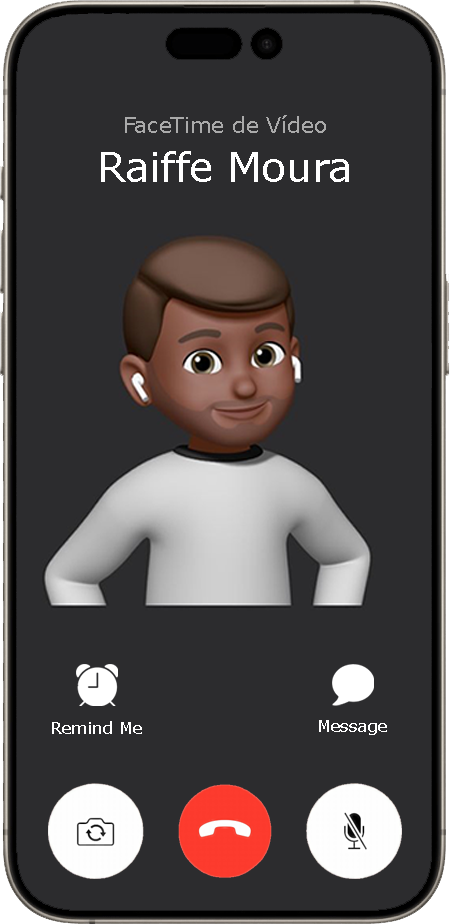
<style>
.page{position:relative;width:450px;height:924px;background:#2c2c2e}
.page>*{position:absolute;margin:0}
.t1{font:21.9px "MSReferenceSansSerif";color:#aaaaaa}
.t2{font:40.6px "MSReferenceSansSerif";color:#ffffff}
.t3{font:16.6px "MSReferenceSansSerif";color:#ffffff}
</style>
<div class="page">
<p class="t1" style="left:101px;top:115px;width:248px;height:67px;text-align:center">FaceTime de Vídeo<br><span class="t2">Raiffe Moura</span></p>
<p class="t3" style="left:52px;top:721px;width:90px;height:13px">Remind Me</p>
<p class="t3" style="left:319px;top:720px;width:68px;height:15px">Message</p>
</div>
